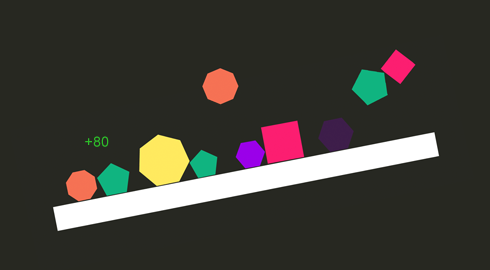
<style>
.page{position:relative;width:490px;height:270px;background:#272821}
.page>*{position:absolute;margin:0}
.t1{font:14.6px "ArialMT";color:#2dbe29;text-transform:uppercase}
</style>
<div class="page">
<p class="t1" style="left:85px;top:136px;width:24px;height:11px">+80</p>
</div>
